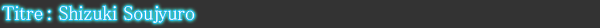
<style>
.page{position:relative;width:600px;height:28px;background:#333333}
.page>*{position:absolute;margin:0}
.t1{font:20px "MS-PMincho";color:#ffffff}
</style>
<div class="page">
<p class="t1" style="left:2px;top:5px;width:193px;height:18px">Titre : Shizuki Soujyuro</p>
</div>
